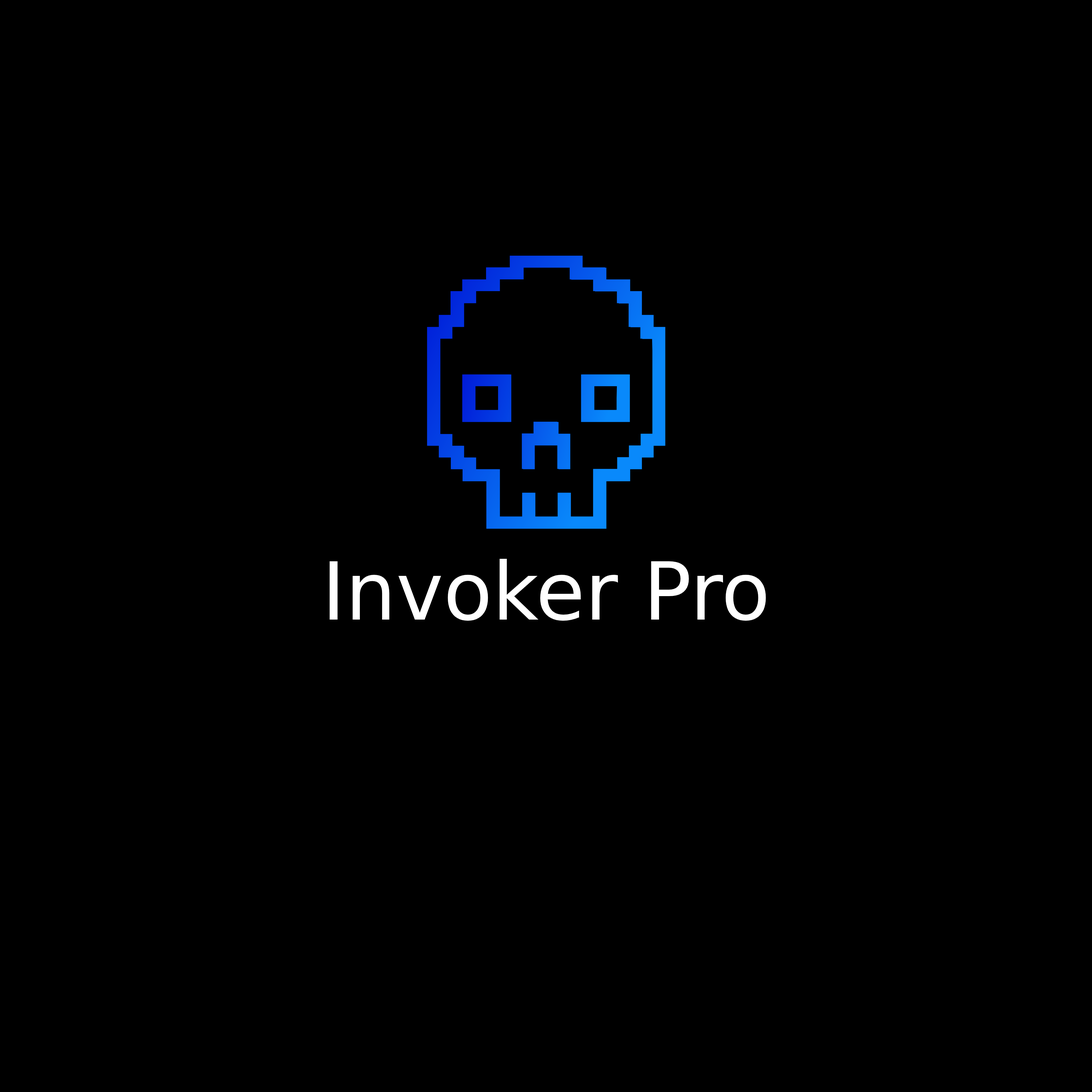
<style>
.page{position:relative;width:1092px;height:1092px;background:#000000}
.page>*{position:absolute;margin:0}
.t1{font:80px "DejaVuSans";color:#ffffff}
</style>
<div class="page">
<p class="t1" style="left:330px;top:559px;width:436px;height:62px">Invoker Pro</p>
</div>
